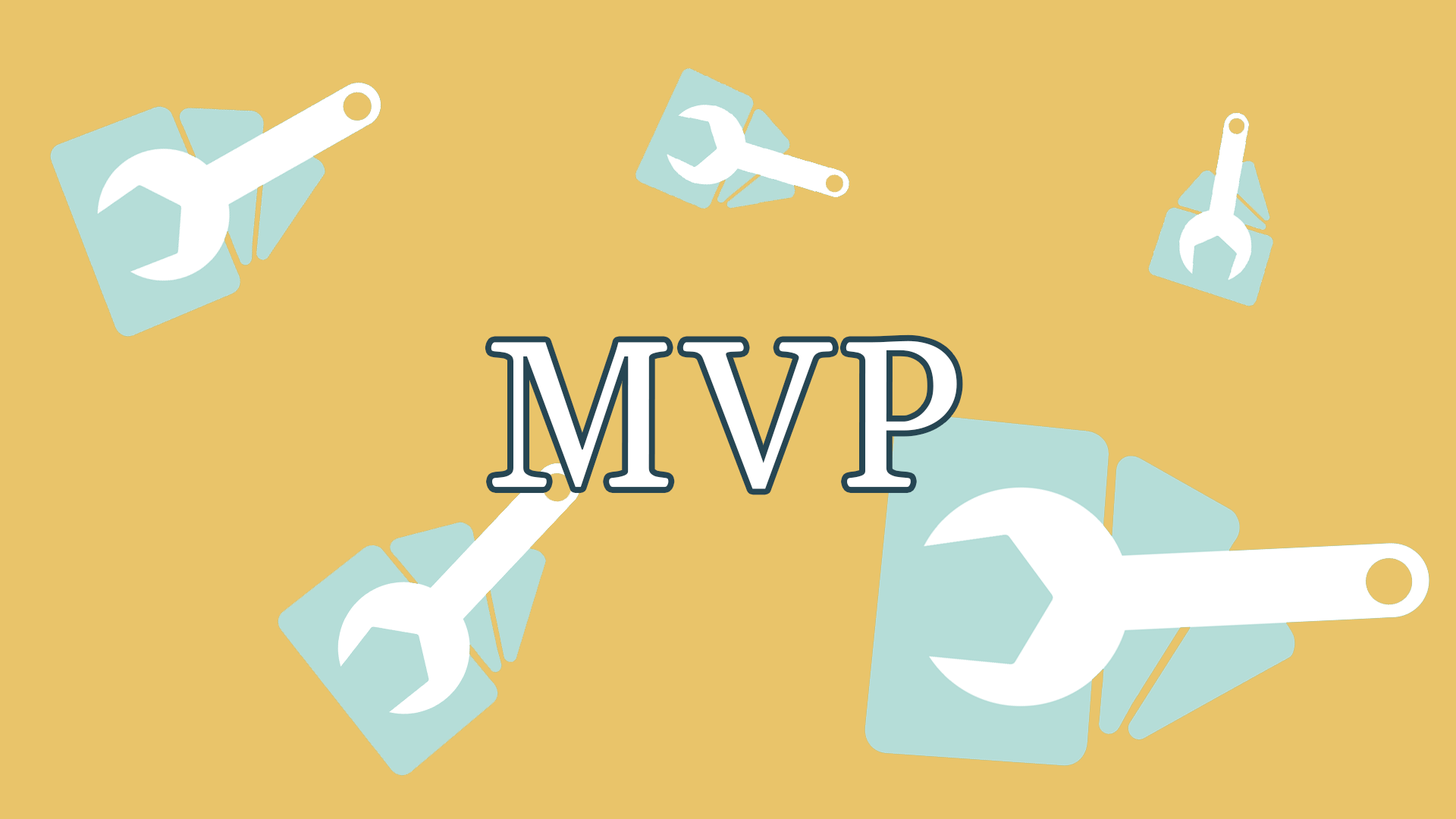
<style>
.page{position:relative;width:1456px;height:819px;background:#e9c46a}
.page>*{position:absolute;margin:0}
.t1{font:208.5px "Gelasio-Regular";letter-spacing:0.05em;color:#ffffff}
</style>
<div class="page">
<p class="t1" style="left:491px;top:340px;width:466px;height:149px">MVP</p>
</div>
